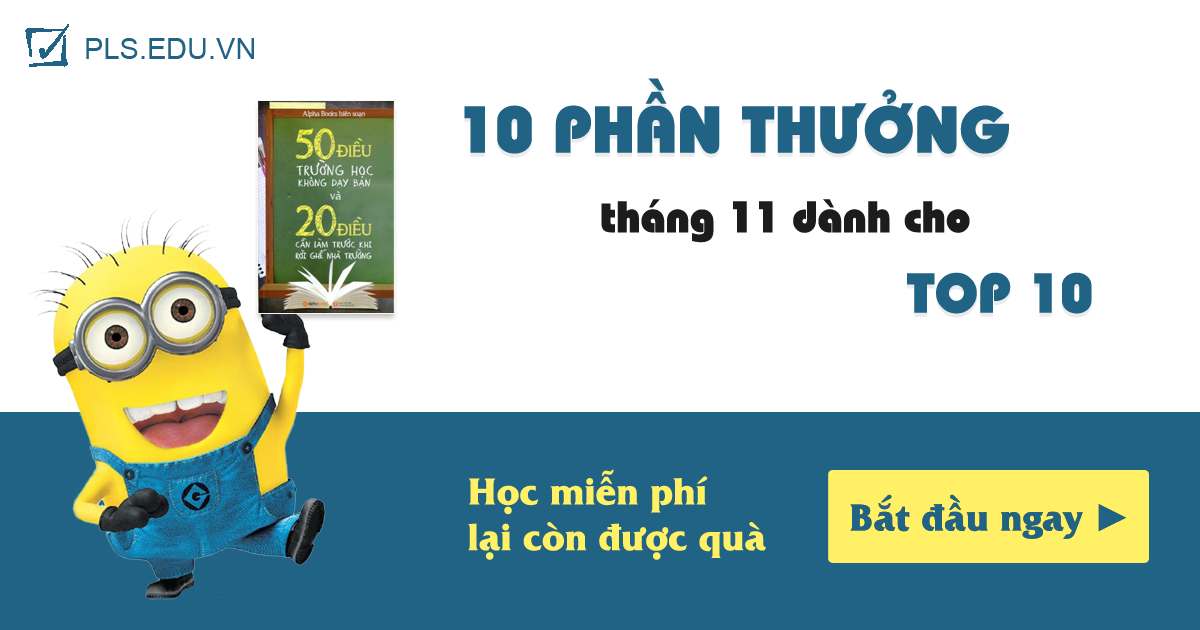
<style>
.page{position:relative;width:1200px;height:630px;background:#ffffff}
.page>*{position:absolute;margin:0}
.t1{font:29px "ArialMT";color:#206385}
.t2{font:66px "UVNBaiSauNang";color:#206385}
.t3{font:44px "UVNBaiSauNang";color:#1c1c1c}
.t4{font:56px "UVNBaiSauNang";color:#206385}
.t5{font:38px "UVNLacLongQuanBold";color:#fff065}
.t6{font:38px "UVNLacLongQuanBold";color:#206385}
.t7{font:38px "TimesNewRomanPSMT";color:#206385}
</style>
<div class="page">
<p class="t1" style="left:86px;top:38px;width:168px;height:21px">PLS.EDU.VN</p>
<p class="t2" style="left:464px;top:78px;width:545px;height:76px">10 PHẦN THƯỞNG</p>
<p class="t3" style="left:601px;top:199px;width:369px;height:44px">tháng 11 dành cho</p>
<p class="t4" style="left:907px;top:272px;width:185px;height:42px">TOP 10</p>
<p class="t5" style="left:468px;top:469px;width:298px;height:91px">Học miễn phí<br>lại còn được quà</p>
<p class="t6" style="left:850px;top:494px;width:276px;height:45px">Bắt đầu ngay <span class="t7">►</span></p>
</div>
